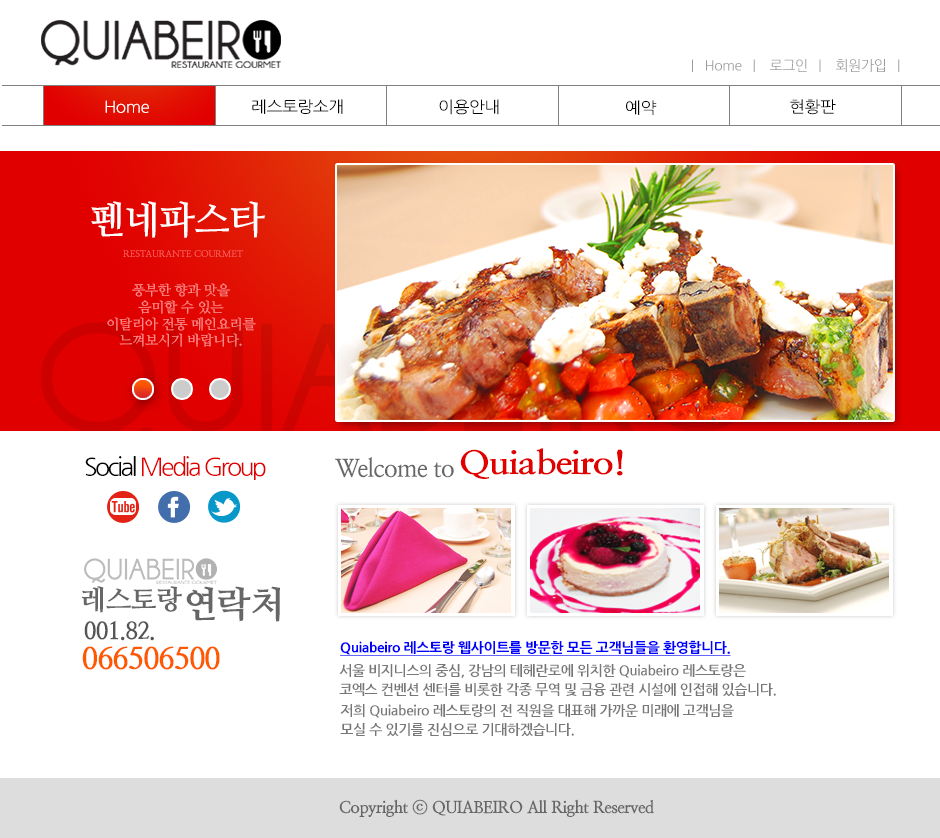
<style>
.page{position:relative;width:940px;height:838px;background:#ffffff}
.page>*{position:absolute;margin:0}
.t1{font:13.9px "NanumGothic";letter-spacing:-0.025em;color:#999999}
.t2{font:16px "NanumGothic";letter-spacing:-0.025em;color:#ffffff;scale:1.06 1}
.t3{font:16px "NanumGothic";letter-spacing:-0.025em;color:#000000;scale:1.06 1}
.t4{font:38px "NanumMyeongjoBold";letter-spacing:-0.025em;color:#ffffff}
.t5{font:9.2px "NanumMyeongjoBold";letter-spacing:-0.025em;color:#ff6060;scale:1.03 1}
.t6{font:13.9px "NanumMyeongjoBold";letter-spacing:-0.025em;color:#ff8888}
.t7{font:32.2px "NanumMyeongjoExtraBold";letter-spacing:-0.025em;color:#e10000;scale:1.15 1}
.t8{font:25px "NanumGothic";letter-spacing:-0.105em;color:#e10000}
.t9{font:25px "NanumGothic";letter-spacing:-0.105em;color:#000000}
.t10{font:24.8px "NanumMyeongjoBold";letter-spacing:-0.025em;color:#666666}
.t11{font:27.4px "NanumMyeongjoExtraBold";letter-spacing:-0.025em;color:#666666}
.t12{font:36.6px "NanumMyeongjoExtraBold";letter-spacing:-0.025em;color:#666666}
.t13{font:23.8px "NanumMyeongjoExtraBold";letter-spacing:-0.025em;color:#555555}
.t14{font:13.9px "NanumGothicExtraBold";letter-spacing:-0.025em;color:#0000ff;text-decoration:underline}
.t15{font:30.2px "NanumMyeongjoExtraBold";letter-spacing:-0.025em;color:#ff5900}
.t16{font:13.9px/19.1px "NanumGothicBold";letter-spacing:-0.025em;color:#777777}
.t17{font:16.5px "NanumMyeongjoExtraBold";letter-spacing:-0.025em;color:#666666}
</style>
<div class="page">
<p class="t1" style="left:692px;top:59px;width:208px;height:13px">|   Home   |    로그인   |    회원가입   |</p>
<p class="t2" style="left:105px;top:100px;width:44px;height:13px">Home</p>
<p class="t3" style="left:252px;top:99px;width:91px;height:15px">레스토랑소개</p>
<p class="t3" style="left:439px;top:99px;width:60px;height:16px">이용안내</p>
<p class="t3" style="left:626px;top:100px;width:31px;height:15px">예약</p>
<p class="t3" style="left:790px;top:99px;width:46px;height:16px">현황판</p>
<p class="t4" style="left:91px;top:201px;width:174px;height:37px">펜네파스타</p>
<p class="t5" style="left:123px;top:250px;width:120px;height:7px">RESTAURANTE COURMET</p>
<p class="t6" style="left:107px;top:283px;width:149px;height:64px;text-align:center">풍부한 향과 맛을<br>음미할 수 있는<br>이탈리아 전통 메인요리를<br>느껴보시기 바랍니다.</p>
<p class="t7" style="left:460px;top:448px;width:163px;height:31px">Quiabeiro!</p>
<p class="t8" style="left:85px;top:456px;width:181px;height:24px"><span class="t9">Social </span>Media Group</p>
<p class="t10" style="left:335px;top:457px;width:119px;height:21px">Welcome to</p>
<p class="t11" style="left:81px;top:586px;width:101px;height:27px">레스토랑</p>
<p class="t12" style="left:186px;top:586px;width:95px;height:36px">연락처</p>
<p class="t13" style="left:84px;top:620px;width:70px;height:21px">001.82.</p>
<p class="t14" style="left:340px;top:640px;width:391px;height:16px">Quiabeiro 레스토랑 웹사이트를 방문한 모든 고객님들을 환영합니다.</p>
<p class="t15" style="left:82px;top:646px;width:138px;height:24px">066506500</p>
<p class="t16" style="left:339px;top:664px;width:437px;height:32px">서울 비지니스의 중심, 강남의 테헤란로에 위치한 Quiabeiro 레스토랑은<br>코엑스 컨벤션 센터를 비롯한 각종 무역 및 금융 관련 시설에 인접해 있습니다.</p>
<p class="t16" style="left:340px;top:704px;width:394px;height:32px">저희 Quiabeiro 레스토랑의 전 직원을 대표해 가까운 미래에 고객님을<br>모실 수 있기를 진심으로 기대하겠습니다.</p>
<p class="t17" style="left:339px;top:799px;width:315px;height:18px">Copyright ⓒ QUIABEIRO All Right Reserved</p>
</div>
